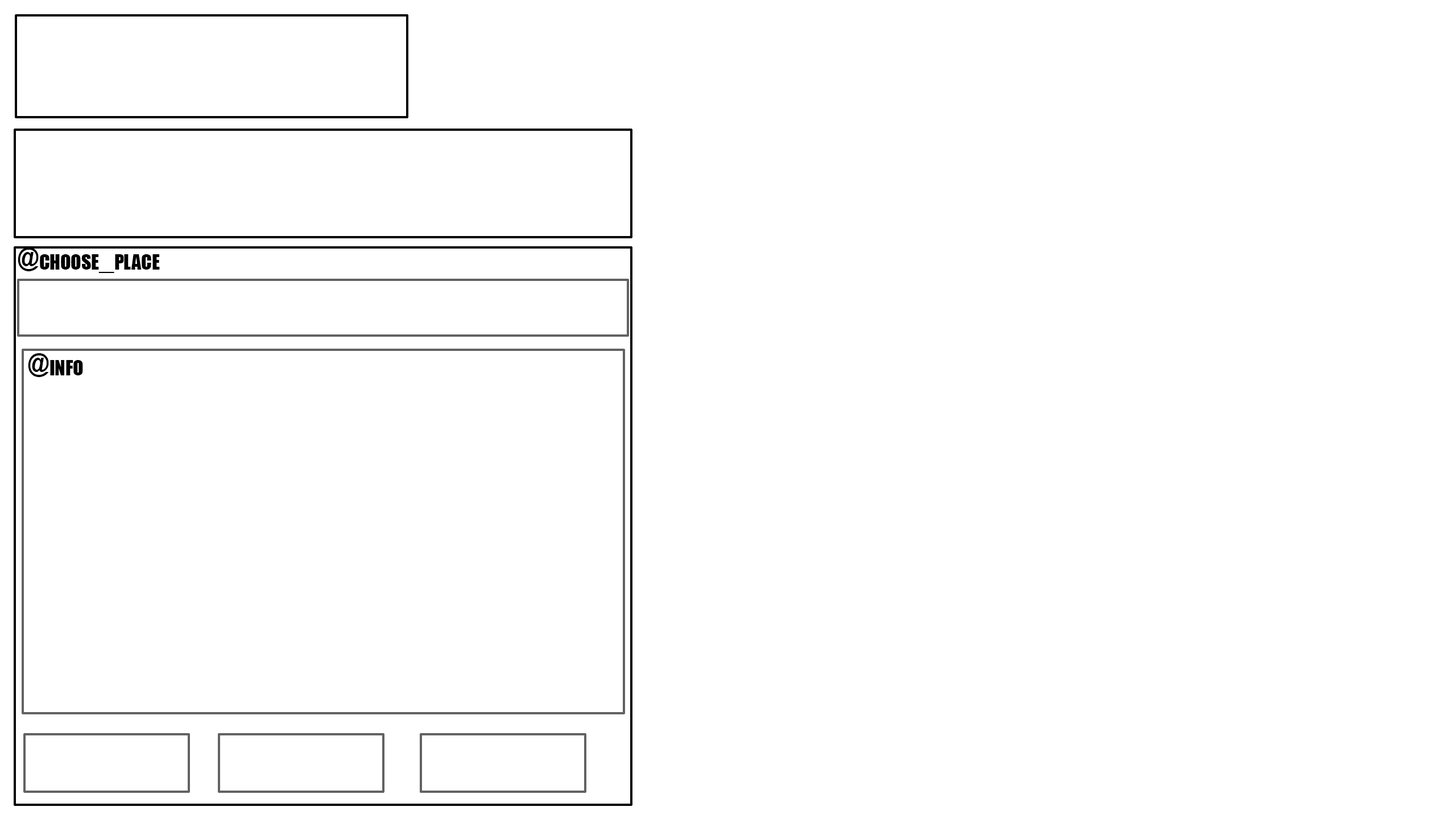
<style>
.page{position:relative;width:1456px;height:819px;background:#ffffff}
.page>*{position:absolute;margin:0}
.t1{font:27.3px "Impact";color:#000000;font-variant:small-caps}
</style>
<div class="page">
<p class="t1" style="left:18px;top:247px;width:142px;height:26px">@choose_place</p>
<p class="t1" style="left:28px;top:353px;width:55px;height:24px">@info</p>
</div>
